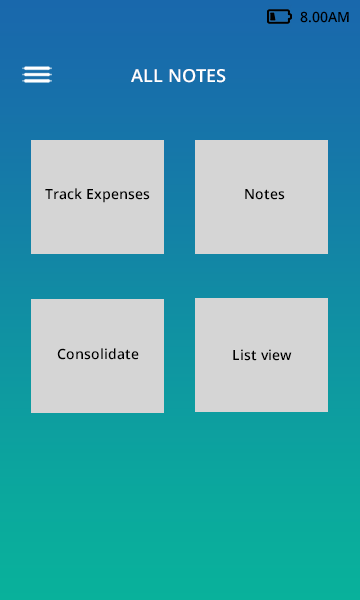
<style>
.page{position:relative;width:360px;height:600px;background:#d5d5d5}
.page>*{position:absolute;margin:0}
.t1{font:14px "OpenSans-Semibold";color:#000000}
.t2{font:18px "OpenSans-Semibold";color:#ffffff}
</style>
<div class="page">
<p class="t1" style="left:300px;top:11px;width:49px;height:12px">8.00AM</p>
<p class="t2" style="left:131px;top:69px;width:95px;height:14px">ALL NOTES</p>
<p class="t1" style="left:45px;top:188px;width:105px;height:15px">Track Expenses</p>
<p class="t1" style="left:245px;top:189px;width:40px;height:11px">Notes</p>
<p class="t1" style="left:57px;top:348px;width:82px;height:12px">Consolidate</p>
<p class="t1" style="left:233px;top:349px;width:59px;height:12px">List view</p>
</div>
